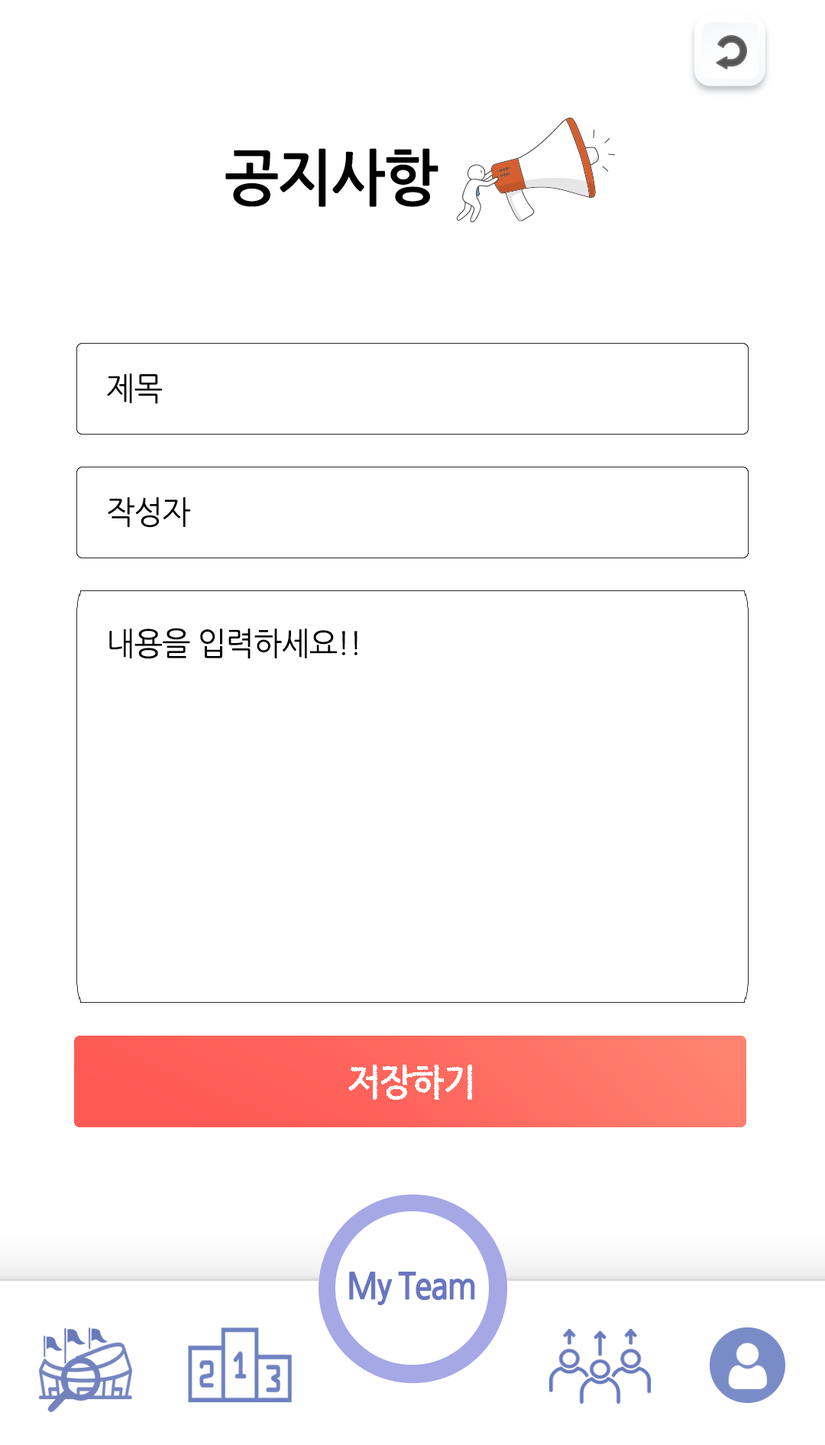
<style>
.page{position:relative;width:825px;height:1445px;background:#ffffff}
.page>*{position:absolute;margin:0}
.t1{font:61.1px "NanumGothicBold";letter-spacing:-0.025em;color:#000000;scale:0.95 1}
.t2{font:32.1px "NanumGothic";letter-spacing:-0.025em;color:#000000;scale:0.95 1}
.t3{font:36.7px "NanumGothicBold";letter-spacing:-0.025em;color:#ffffff;scale:0.95 1}
</style>
<div class="page">
<p class="t1" style="left:225px;top:148px;width:213px;height:59px">공지사항</p>
<p class="t2" style="left:107px;top:374px;width:55px;height:30px">제목</p>
<p class="t2" style="left:108px;top:497px;width:82px;height:31px">작성자</p>
<p class="t2" style="left:109px;top:628px;width:249px;height:31px">내용을 입력하세요!!</p>
<p class="t3" style="left:348px;top:1065px;width:124px;height:35px">저장하기</p>
</div>
